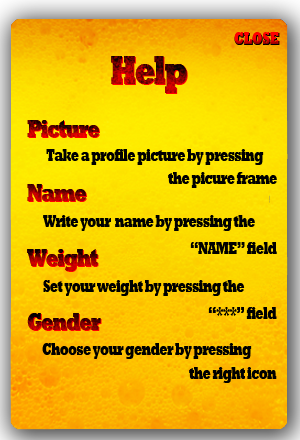
<style>
.page{position:relative;width:300px;height:440px}
.page>*{position:absolute;margin:0}
.t1{font:16.9px "Rockwell-ExtraBold";letter-spacing:0.005em;scale:0.71 1}
.t2{font:25.4px/64.3px "Rockwell-ExtraBold";letter-spacing:-0.06em;scale:0.71 1}
.t3{font:16.9px "Rockwell-ExtraBold";letter-spacing:-0.06em;color:#000000;scale:0.71 1}
</style>
<div class="page">
<p class="t1" style="left:234px;top:33px;width:45px;height:12px">CLOSE</p>
<p class="t1" style="left:235px;top:33px;width:45px;height:12px">CLOSE</p>
<p class="t2" style="left:27px;top:120px;width:74px;height:210px">Picture<br>Name<br>Weight<br>Gender</p>
<p class="t2" style="left:28px;top:121px;width:74px;height:210px">Picture<br>Name<br>Weight<br>Gender</p>
<p class="t3" style="left:46px;top:149px;width:218px;height:16px">Take a profile picture by pressing</p>
<p class="t3" style="left:168px;top:172px;width:109px;height:16px">the picure frame</p>
<p class="t3" style="left:43px;top:215px;width:212px;height:16px">Write your  name by pressing the</p>
<p class="t3" style="left:190px;top:242px;width:87px;height:12px">“NAME” field</p>
<p class="t3" style="left:43px;top:280px;width:202px;height:16px">Set your weight by pressing the</p>
<p class="t3" style="left:208px;top:307px;width:69px;height:12px">“***” field</p>
<p class="t3" style="left:42px;top:343px;width:210px;height:16px">Choose your gender by pressing</p>
<p class="t3" style="left:189px;top:367px;width:88px;height:16px">the right icon</p>
</div>
